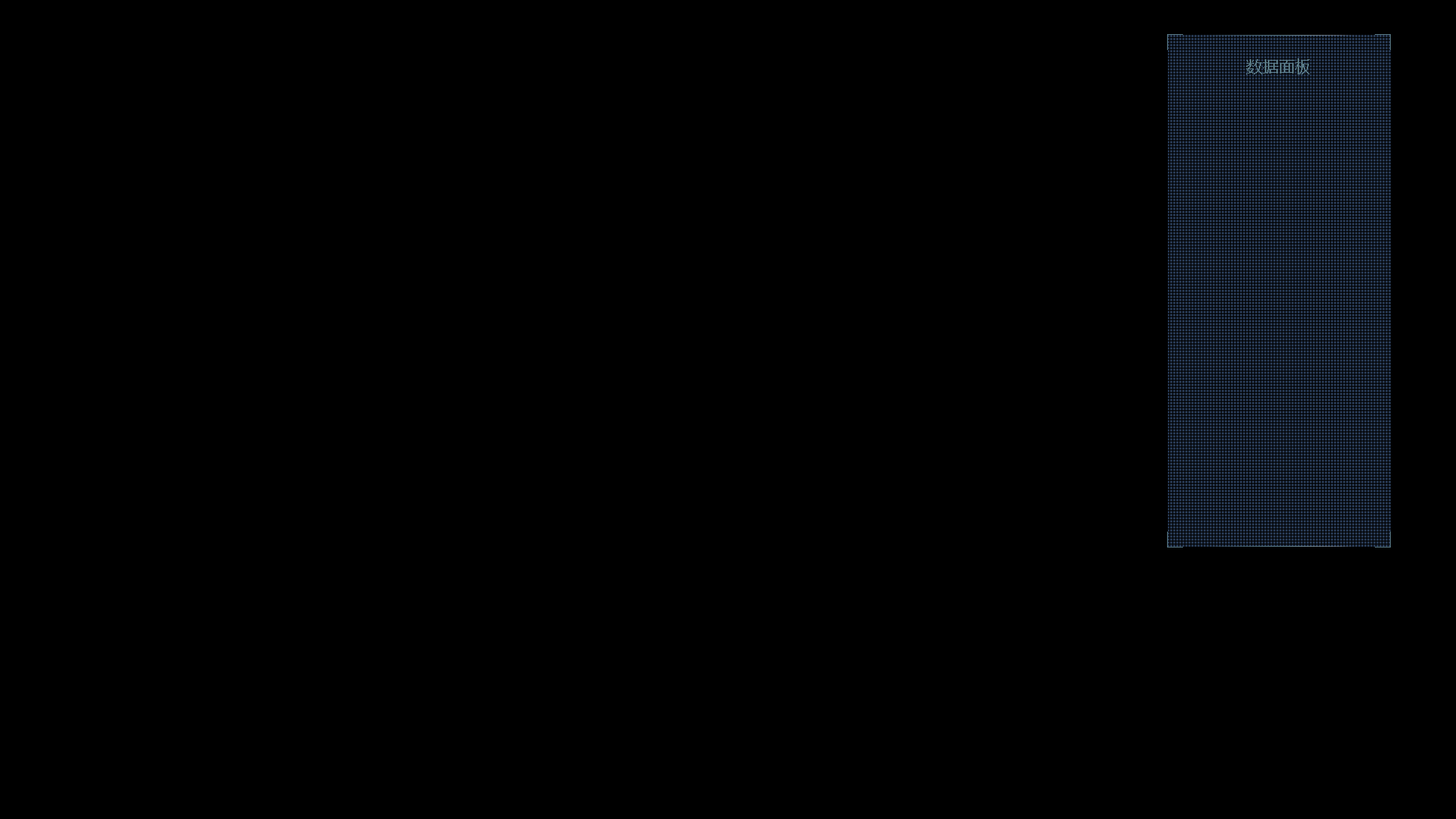
<style>
.page{position:relative;width:1456px;height:819px;background:#000000}
.page>*{position:absolute;margin:0}
.t1{font:16.2px "MicrosoftYaHei";color:#597985}
</style>
<div class="page">
<p class="t1" style="left:1246px;top:58px;width:64px;height:16px">数据面板</p>
</div>
